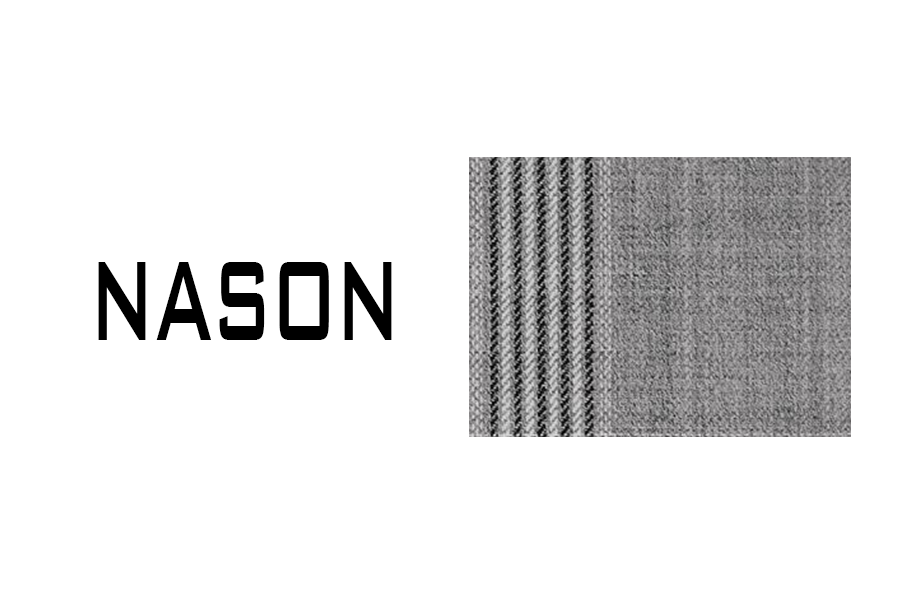
<style>
.page{position:relative;width:900px;height:600px;background:#ffffff}
.page>*{position:absolute;margin:0}
.t1{font:183.9px "BankGothicBT-Medium";color:#000000;scale:0.49 1}
</style>
<div class="page">
<p class="t1" style="left:98px;top:262px;width:294px;height:78px">nason</p>
</div>
